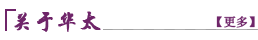
<style>
.page{position:relative;width:258px;height:40px;background:#ffffff}
.page>*{position:absolute;margin:0}
.t1{font:22px "STXingkai";letter-spacing:-0.005em;color:#6f2569;font-weight:bold}
.t2{font:12px "SimSun";letter-spacing:-0.005em;color:#6f2569;font-weight:bold}
</style>
<div class="page">
<p class="t1" style="left:14px;top:11px;width:87px;height:21px">关于华太</p>
<p class="t2" style="left:216px;top:16px;width:39px;height:12px">【更多】</p>
</div>
